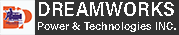
<style>
.page{position:relative;width:179px;height:35px;background:#333333}
.page>*{position:absolute;margin:0}
.t1{font:20.4px "AcuminConcept-SemiCondensedBold";color:#ffffff}
.t2{font:11.6px "AcuminConcept-SemiCondensedBold";color:#ffffff}
</style>
<div class="page">
<p class="t1" style="left:39px;top:2px;width:135px;height:14px">DREAMWORKS</p>
<p class="t2" style="left:38px;top:22px;width:138px;height:10px">Power &amp; Technologies INC.</p>
</div>
